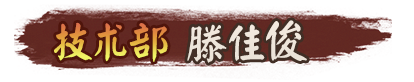
<style>
.page{position:relative;width:414px;height:82px;background:#ffffff}
.page>*{position:absolute;margin:0}
.t1{font:37.7px "Tianshi-Yanti"}
.t2{font:37.7px "Tianshi-Yanti";letter-spacing:0.05em;color:#eee6db}
</style>
<div class="page">
<p class="t1" style="left:54px;top:22px;width:114px;height:40px">技术部</p>
<p class="t2" style="left:187px;top:20px;width:120px;height:43px">滕佳俊</p>
</div>
